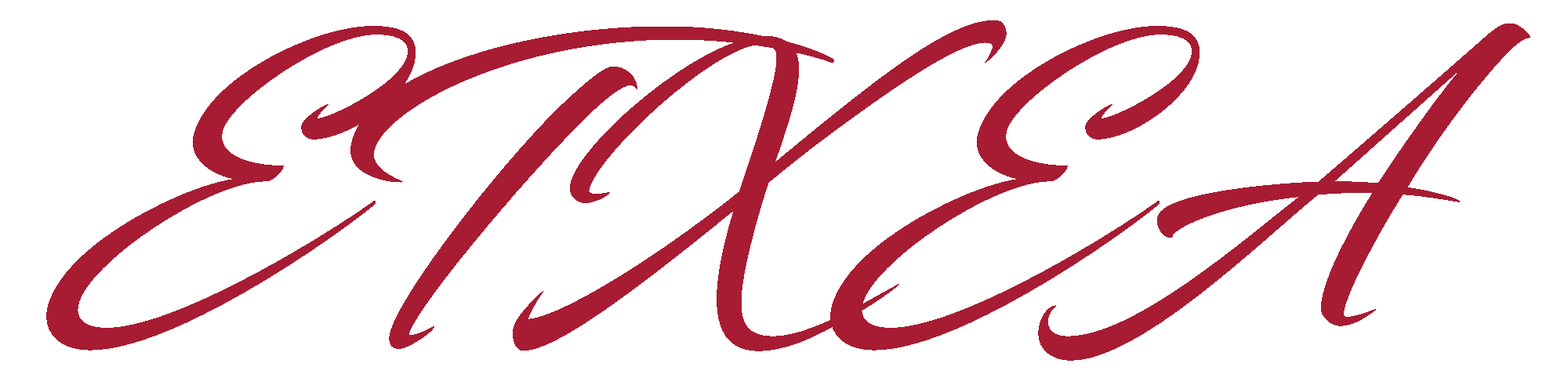
<style>
.page{position:relative;width:1568px;height:389px;background:#ffffff}
.page>*{position:absolute;margin:0}
.t1{font:313.6px "Blacksword";color:#a71c32;font-style:italic}
</style>
<div class="page">
<p class="t1" style="left:46px;top:20px;width:1484px;height:341px">ETXEA</p>
</div>
